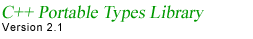
<style>
.page{position:relative;width:253px;height:39px;background:#ffffff}
.page>*{position:absolute;margin:0}
.t1{font:18px "TimesNewRomanPSMT";color:#009900;font-style:italic}
.t2{font:11px "ArialMT";letter-spacing:0.05em;color:#000000}
</style>
<div class="page">
<p class="t1" style="left:2px;top:5px;width:202px;height:17px">C++ Portable Types Library</p>
<p class="t2" style="left:2px;top:23px;width:59px;height:8px">Version 2.1</p>
</div>
